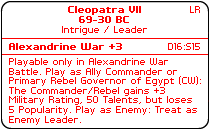
<style>
.page{position:relative;width:210px;height:130px;background:#ffffff}
.page>*{position:absolute;margin:0}
.t1{font:8px "PFTempestaSeven-Bold";color:#ff0000}
.t2{font:8px "PFTempestaSeven";color:#ff0000}
</style>
<div class="page">
<p class="t1" style="left:68px;top:6px;width:73px;height:17px;text-align:center">Cleopatra VII<br>69-30 BC</p>
<p class="t2" style="left:190px;top:6px;width:10px;height:7px">LR</p>
<p class="t2" style="left:62px;top:26px;width:85px;height:9px">Intrigue / Leader</p>
<p class="t1" style="left:9px;top:43px;width:113px;height:7px">Alexandrine War +3</p>
<p class="t2" style="left:168px;top:43px;width:32px;height:7px">D16:S15</p>
<p class="t2" style="left:9px;top:58px;width:192px;height:67px">Playable only in Alexandrine War<br>Battle. Play as Ally Commander or<br>Primary Rebel Governor of Egypt (CW):<br>The Commander/Rebel gains +3<br>Military Rating, 50 Talents, but loses<br>5 Popularity. Play as Enemy: Treat as <br>Enemy Leader.</p>
</div>
